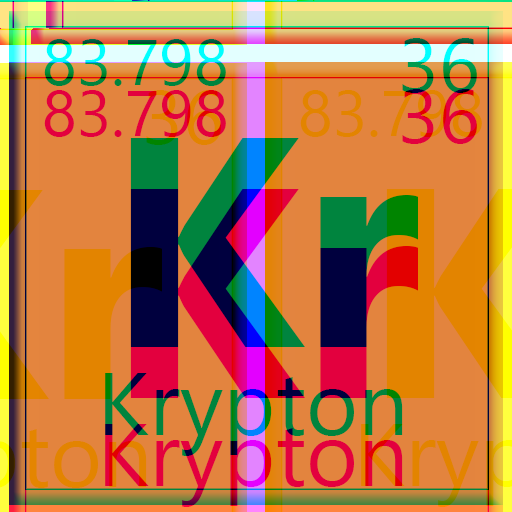
<style>
.page{position:relative;width:512px;height:512px;background:#e3843e}
.page>*{position:absolute;margin:0}
.t1{font:64px "SegoeUI"}
.t2{font:76px "SegoeUI"}
.t3{font:298.7px "SegoeUI-Bold"}
.t4{font:89.3px "SegoeUI"}
</style>
<div class="page">
<p class="t1" style="left:44px;top:37px;width:182px;height:47px">83.798</p>
<p class="t2" style="left:402px;top:36px;width:75px;height:55px">36</p>
<p class="t3" style="left:130px;top:136px;width:288px;height:209px">Kr</p>
<p class="t4" style="left:105px;top:371px;width:298px;height:83px">Krypton</p>
</div>
